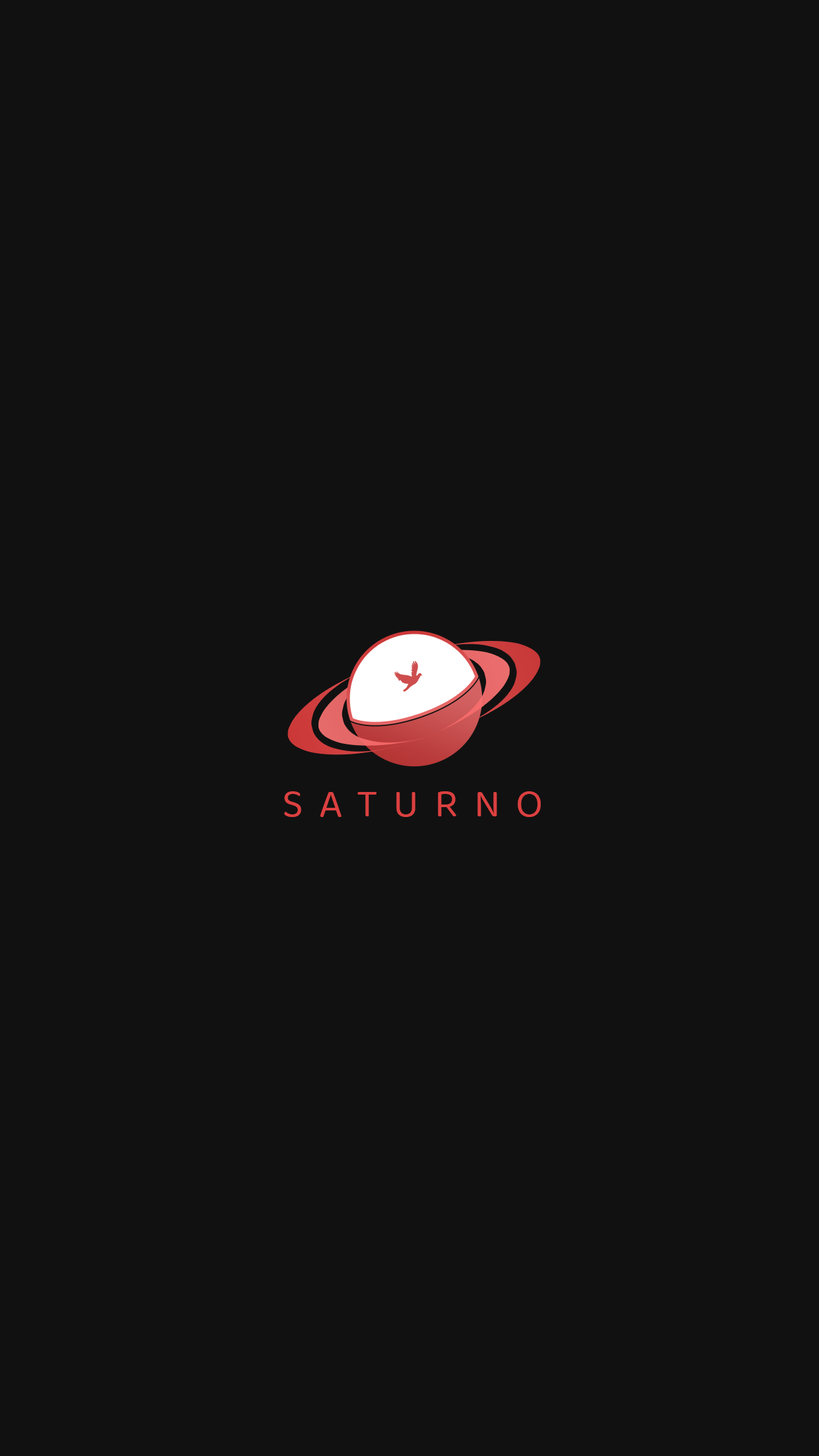
<style>
.page{position:relative;width:819px;height:1456px;background:#111111}
.page>*{position:absolute;margin:0}
.t1{font:39.6px "BalooBhai2-Regular";letter-spacing:0.4em;color:#dc4040;font-variant:small-caps}
</style>
<div class="page">
<p class="t1" style="left:284px;top:791px;width:257px;height:26px">SATURNO</p>
</div>
